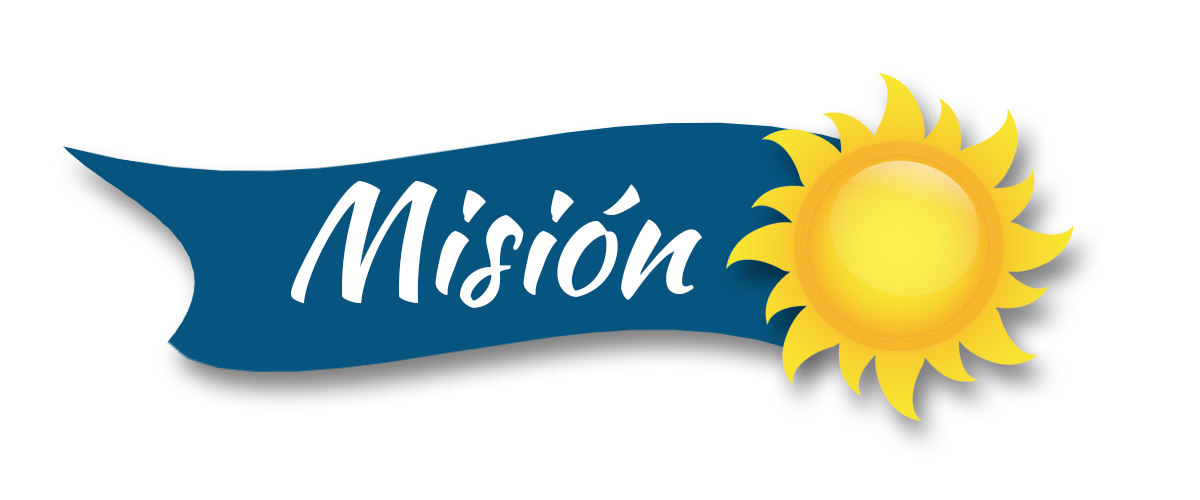
<style>
.page{position:relative;width:1200px;height:500px;background:#ffffff}
.page>*{position:absolute;margin:0}
.t1{font:150px "KaushanScript-Regular";color:#ffffff}
</style>
<div class="page">
<p class="t1" style="left:291px;top:181px;width:411px;height:127px">Misión</p>
</div>
